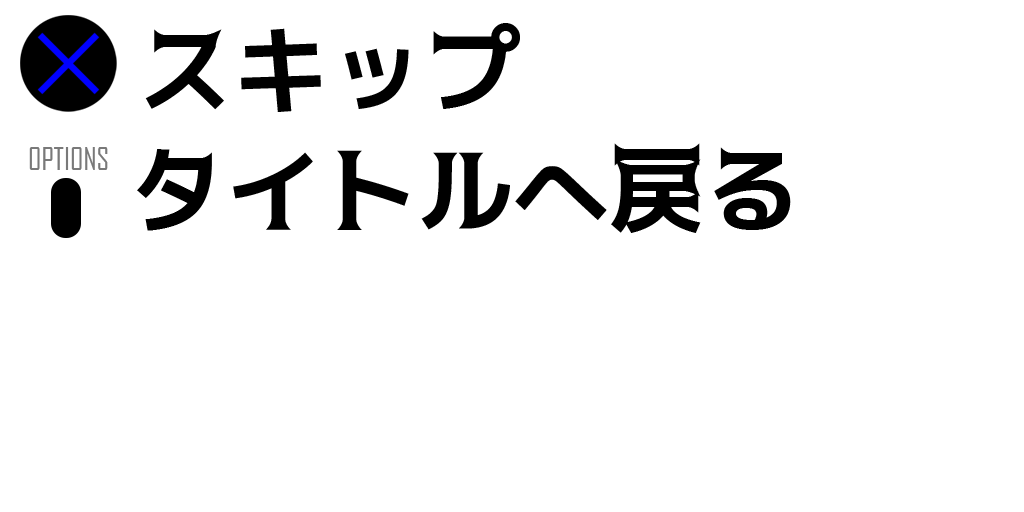
<style>
.page{position:relative;width:1024px;height:512px;background:#ffffff}
.page>*{position:absolute;margin:0}
.t1{font:96px "AMEMUCHIGOTHICMONO-04";color:#000000}
</style>
<div class="page">
<p class="t1" style="left:145px;top:23px;width:375px;height:89px">スキップ</p>
<p class="t1" style="left:137px;top:143px;width:654px;height:90px">タイトルへ戻る</p>
</div>
